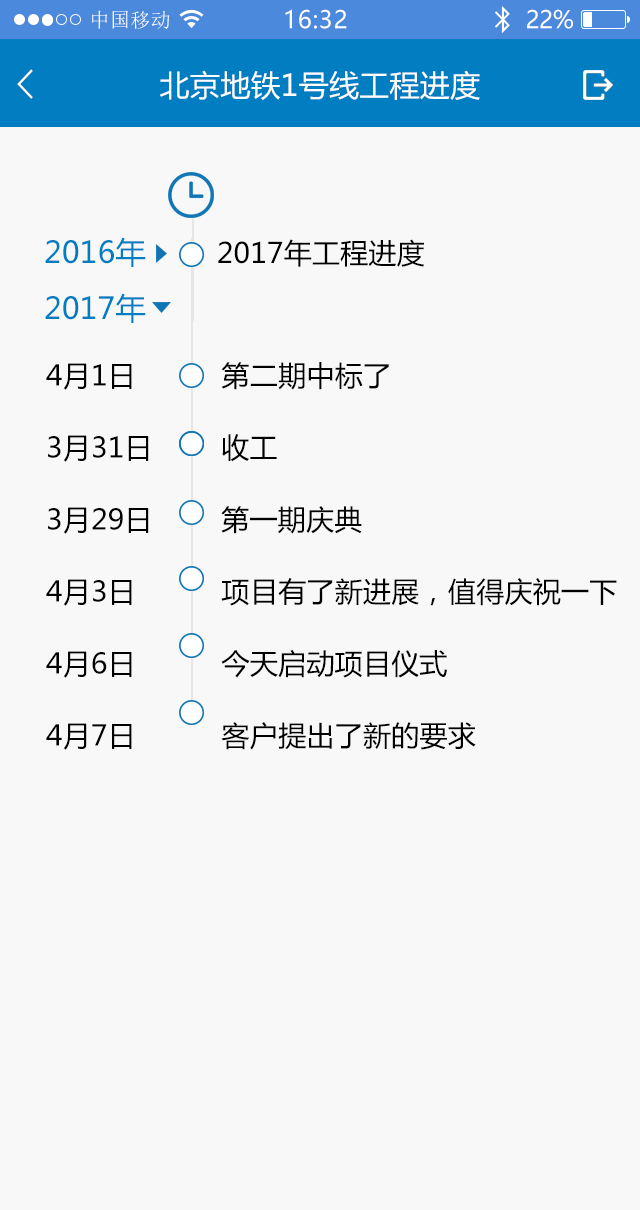
<style>
.page{position:relative;width:640px;height:1210px;background:#f8f8f8}
.page>*{position:absolute;margin:0}
.t1{font:20px "SimSun";letter-spacing:0.02em;color:#ffffff}
.t2{font:24px "MicrosoftYaHei";letter-spacing:0.025em;color:#ffffff}
.t3{font:24px "MicrosoftYaHei";letter-spacing:-0.02em;color:#ffffff}
.t4{font:30px "MicrosoftYaHei";letter-spacing:0.01em;color:#ffffff}
.t5{font:30px "MicrosoftYaHei";letter-spacing:0.01em;color:#017ec1}
.t6{font:28px "MicrosoftYaHei";letter-spacing:0.01em;color:#000000}
.t7{font:28px/72px "MicrosoftYaHei";letter-spacing:0.01em;color:#000000}
</style>
<div class="page">
<p class="t1" style="left:92px;top:10px;width:78px;height:19px">中国移动</p>
<p class="t2" style="left:285px;top:9px;width:62px;height:20px">16:32</p>
<p class="t3" style="left:527px;top:9px;width:46px;height:20px">22%</p>
<p class="t4" style="left:160px;top:70px;width:320px;height:30px">北京地铁1号线工程进度</p>
<p class="t5" style="left:45px;top:237px;width:101px;height:30px">2016年</p>
<p class="t6" style="left:218px;top:239px;width:207px;height:28px">2017年工程进度</p>
<p class="t5" style="left:45px;top:293px;width:101px;height:30px">2017年</p>
<p class="t7" style="left:46px;top:362px;width:571px;height:388px">4月1日          第二期中标了<br>3月31日        收工<br>3月29日        第一期庆典<br>4月3日          项目有了新进展，值得庆祝一下<br>4月6日          今天启动项目仪式<br>4月7日          客户提出了新的要求</p>
</div>
